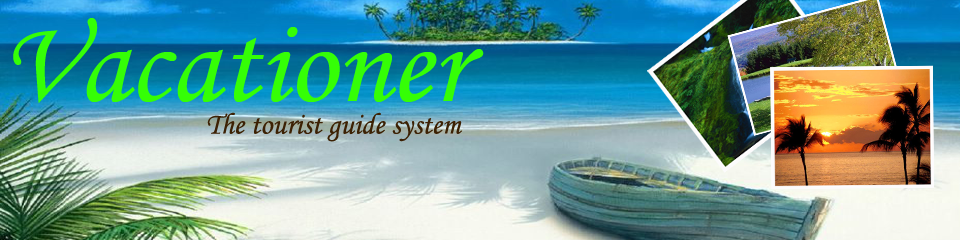
<style>
.page{position:relative;width:960px;height:240px}
.page>*{position:absolute;margin:0}
.t1{font:120px "MonotypeCorsiva";color:#35fe06}
.t2{font:30px "MonotypeCorsiva";color:#3c2104}
</style>
<div class="page">
<p class="t1" style="left:13px;top:18px;width:471px;height:85px">Vacationer</p>
<p class="t2" style="left:207px;top:112px;width:255px;height:30px">The tourist guide system</p>
</div>
